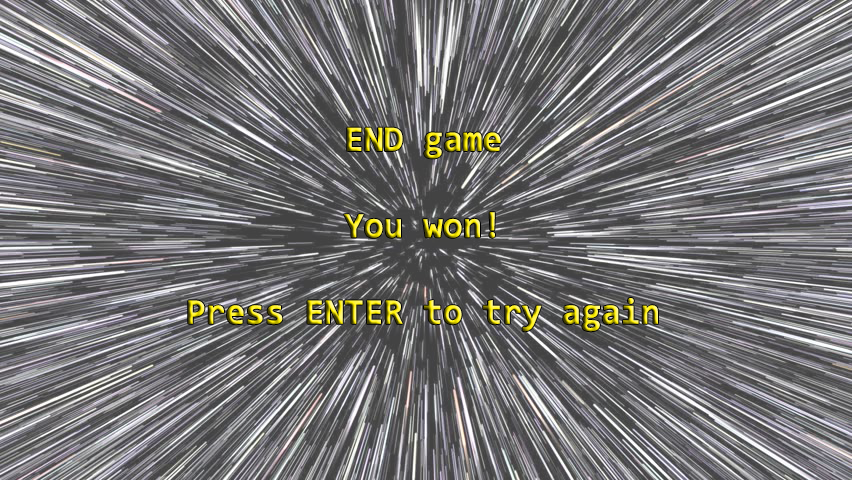
<style>
.page{position:relative;width:852px;height:480px}
.page>*{position:absolute;margin:0}
.t1{font:36px "Consolas-Bold"}
</style>
<div class="page">
<p class="t1" style="left:188px;top:127px;width:470px;height:205px;text-align:center">END game<br> <br>You won!<br><br>Press ENTER to try again</p>
</div>
